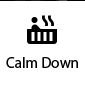
<style>
.page{position:relative;width:85px;height:85px;background:#ffffff}
.page>*{position:absolute;margin:0}
.t1{font:15px "MyriadPro-Regular"}
</style>
<div class="page">
<p class="t1" style="left:6px;top:56px;width:72px;height:11px">Calm Down</p>
</div>
